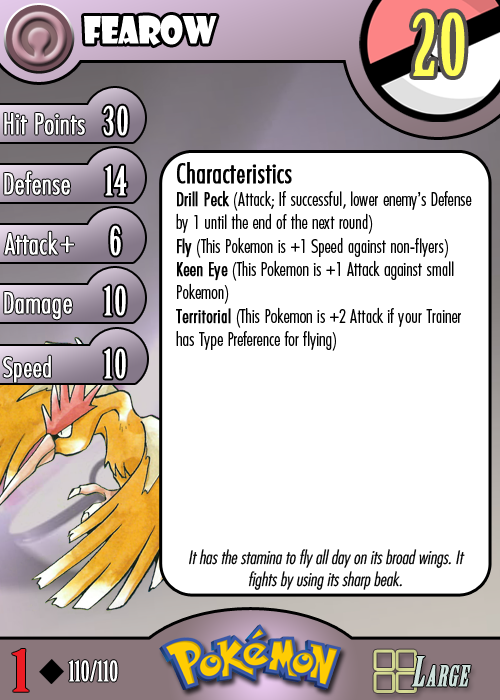
<style>
.page{position:relative;width:500px;height:700px;background:#ffffff}
.page>*{position:absolute;margin:0}
.t1{font:36.7px "ShowcardGothic-Reg";letter-spacing:-0.025em;color:#ffffff;scale:0.91 1}
.t2{font:83.3px "BirchStd";letter-spacing:0.025em;color:#fffd59;font-weight:bold}
.t3{font:27.8px "Futura-CondensedLight";color:#ffffff;font-weight:bold}
.t4{font:38.9px "BirchStd";letter-spacing:0.035em;color:#ffffff;font-weight:bold}
.t5{font:19.4px "FuturaCondensedBQ-Light";color:#010101}
.t6{font:27.8px "FuturaCondensedBQ-Light";color:#010101;font-weight:bold}
.t7{font:19.4px "FuturaCondensedBQ-Light";color:#010101;font-weight:bold}
.t8{font:30.6px "Futura-CondensedLight";color:#ffffff;font-weight:bold}
.t9{font:27.8px "FuturaCondensedBQ-Light";color:#ffffff;font-weight:bold}
.t10{font:18.1px "Futura-CondensedLight";color:#010101;font-style:italic}
.t11{font:55.6px "BirchStd";color:#ed1c24;font-weight:bold;scale:1.5 1}
.t12{font:27.8px "BirchStd";color:#ffffff;font-weight:bold}
</style>
<div class="page">
<p class="t1" style="left:84px;top:15px;width:133px;height:31px">fearow</p>
<p class="t2" style="left:413px;top:12px;width:52px;height:64px">20</p>
<p class="t3" style="left:4px;top:113px;width:81px;height:22px">Hit Points</p>
<p class="t4" style="left:103px;top:105px;width:25px;height:31px">30</p>
<p class="t3" style="left:4px;top:171px;width:66px;height:24px">Defense</p>
<p class="t4" style="left:105px;top:165px;width:22px;height:31px">14</p>
<p class="t5" style="left:176px;top:162px;width:296px;height:189px"><span class="t6">Characteristics<br></span><span class="t7">Drill Peck</span> (Attack; If successful, lower enemy’s Defense by 1 until the end of the next round)<br><span class="t7">Fly</span> (This Pokemon is +1 Speed against non-flyers)<br><span class="t7">Keen Eye</span> (This Pokemon is +1 Attack against small Pokemon)<br><span class="t7">Territorial</span> (This Pokemon is +2 Attack if your Trainer has Type Preference for flying)</p>
<p class="t3" style="left:4px;top:231px;width:54px;height:24px">Attack</p>
<p class="t4" style="left:110px;top:225px;width:11px;height:31px">6</p>
<p class="t8" style="left:60px;top:236px;width:14px;height:17px">+</p>
<p class="t3" style="left:4px;top:292px;width:68px;height:28px">Damage</p>
<p class="t4" style="left:104px;top:285px;width:22px;height:31px">10</p>
<p class="t4" style="left:104px;top:348px;width:22px;height:31px">10</p>
<p class="t9" style="left:3px;top:355px;width:48px;height:28px">Speed</p>
<p class="t10" style="left:189px;top:549px;width:276px;height:41px;text-align:center">It has the stamina to fly all day on its broad wings. It fights by using its sharp beak.</p>
<p class="t11" style="left:12px;top:649px;width:17px;height:43px">1</p>
<p class="t12" style="left:68px;top:660px;width:50px;height:22px">110/110</p>
</div>
